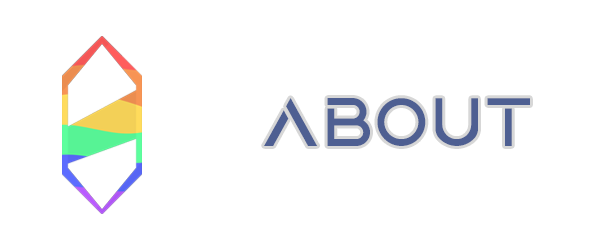
<style>
.page{position:relative;width:600px;height:250px;background:#ffffff}
.page>*{position:absolute;margin:0}
.t1{font:72px "AquireRegular";letter-spacing:0.04em;color:#4e5f92}
</style>
<div class="page">
<p class="t1" style="left:264px;top:98px;width:266px;height:48px">ABOUT</p>
</div>
